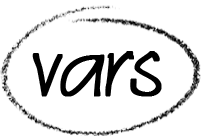
<style>
.page{position:relative;width:201px;height:136px;background:#ffffff}
.page>*{position:absolute;margin:0}
.t1{font:100px "Architext";color:#000000;font-weight:bold}
</style>
<div class="page">
<p class="t1" style="left:32px;top:51px;width:130px;height:46px">vars</p>
</div>
